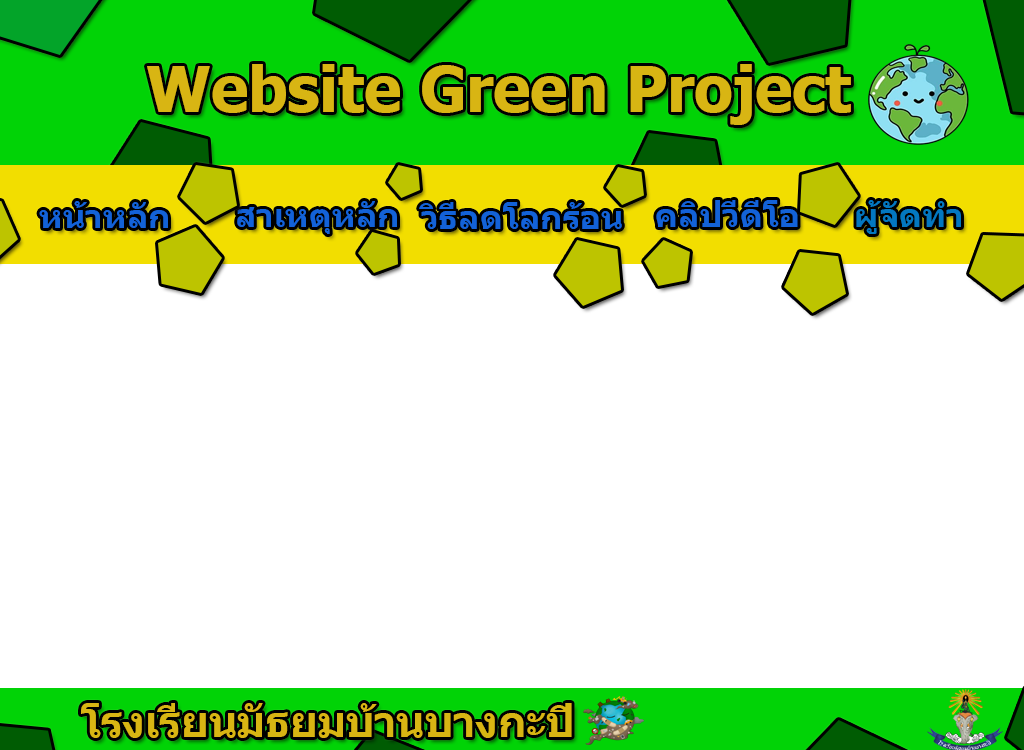
<style>
.page{position:relative;width:1024px;height:750px;background:#ffffff}
.page>*{position:absolute;margin:0}
.t1{font:62.5px "Tahoma-Bold";color:#d8b513}
.t2{font:33.3px "Tahoma-Bold";color:#1362d8}
.t3{font:33.3px "Tahoma-Bold";color:#0377c0}
.t4{font:41.7px "Tahoma-Bold";color:#d8b513}
</style>
<div class="page">
<p class="t1" style="left:147px;top:64px;width:704px;height:61px">Website Green Project</p>
<p class="t2" style="left:39px;top:201px;width:129px;height:27px">หน้าหลัก</p>
<p class="t2" style="left:237px;top:201px;width:160px;height:33px">สาเหตุหลัก</p>
<p class="t2" style="left:419px;top:202px;width:203px;height:27px">วิธีลดโลกร้อน</p>
<p class="t2" style="left:656px;top:200px;width:142px;height:27px">คลิปวีดีโอ</p>
<p class="t3" style="left:856px;top:200px;width:105px;height:34px">ผู้จัดทำ</p>
<p class="t4" style="left:81px;top:703px;width:491px;height:35px">โรงเรียนมัธยมบ้านบางกะปิ</p>
</div>
